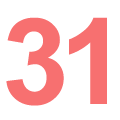
<style>
.page{position:relative;width:120px;height:120px;background:#ffffff}
.page>*{position:absolute;margin:0}
.t1{font:120px "Arial-BoldMT";letter-spacing:-0.075em;color:#f77070}
</style>
<div class="page">
<p class="t1" style="left:6px;top:17px;width:101px;height:89px">31</p>
</div>
